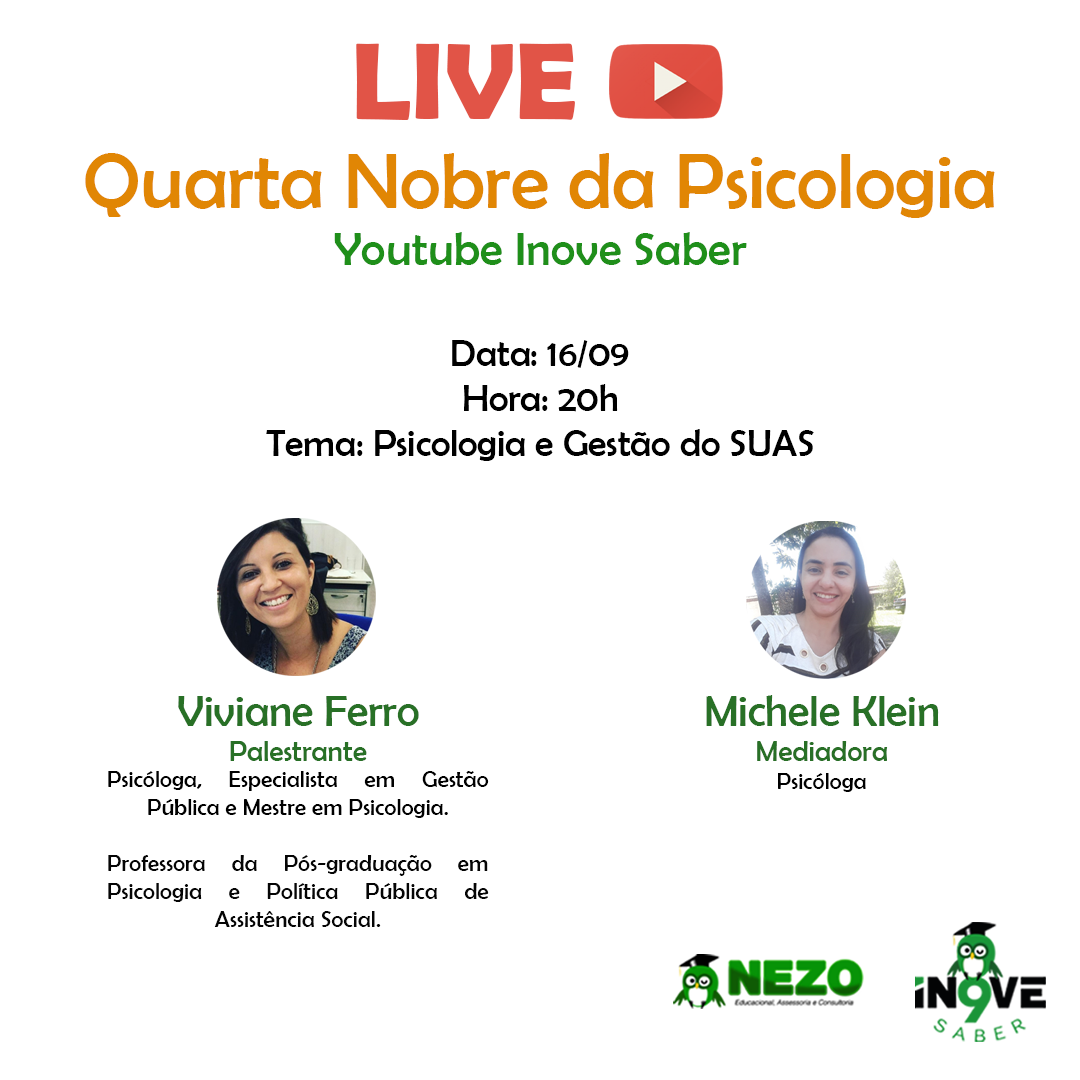
<style>
.page{position:relative;width:1080px;height:1080px;background:#ffffff}
.page>*{position:absolute;margin:0}
.t1{font:109.4px "BerlinSansFBDemi-Bold";color:#e15447}
.t2{font:78.7px "BerlinSansFB-Reg";color:#e18604}
.t3{font:47.2px "BerlinSansFB-Reg";color:#1f8f1a}
.t4{font:37.6px "BerlinSansFB-Reg";color:#000000}
.t5{font:37.6px/53.7px "BerlinSansFB-Reg";color:#000000}
.t6{font:23.3px "BerlinSansFB-Reg";color:#050505}
.t7{font:43.6px "BerlinSansFB-Reg";color:#287026}
.t8{font:29.1px "BerlinSansFB-Reg";color:#287026}
.t9{font:23.3px/0px "BerlinSansFB-Reg";color:#000000}
.t10{font:23.3px "BerlinSansFB-Reg";color:#000000}
</style>
<div class="page">
<p class="t1" style="left:356px;top:43px;width:219px;height:77px">LIVE</p>
<p class="t2" style="left:85px;top:153px;width:910px;height:112px;text-align:center">Quarta Nobre da Psicologia<br><span class="t3">Youtube Inove Saber</span></p>
<p class="t4" style="left:266px;top:340px;width:548px;height:121px;text-align:center"><span class="t5">Data: 16/09<br></span>Hora: 20h<br>Tema: Psicologia e Gestão do SUAS</p>
<p class="t6" style="left:108px;top:696px;width:381px;height:231px;text-align:center"><span class="t7">Viviane Ferro<br></span><span class="t8">Palestrante<br><br></span><span class="t9">Psicóloga, Especialista em Gestão Pública e Mestre </span><span class="t10">em Psicologia.<br><br></span>Professora da Pós-graduação em Psicologia e Política Pública de Assistência Social.</p>
<p class="t7" style="left:706px;top:695px;width:233px;height:97px;text-align:center">Michele Klein<br><span class="t8">Mediadora<br></span><span class="t10">Psicóloga</span></p>
</div>
